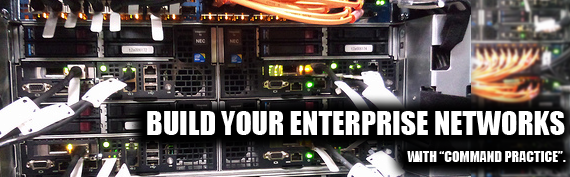
<style>
.page{position:relative;width:570px;height:177px}
.page>*{position:absolute;margin:0}
.t1{font:30px "Impact";color:#ffffff}
.t2{font:14px "Impact";color:#ffffff}
</style>
<div class="page">
<p class="t1" style="left:147px;top:111px;width:418px;height:24px">BUILD YOUR ENTERPRISE NETWORKS</p>
<p class="t2" style="left:407px;top:151px;width:159px;height:11px">WITH “COMMAND PRACTICE”.</p>
</div>
